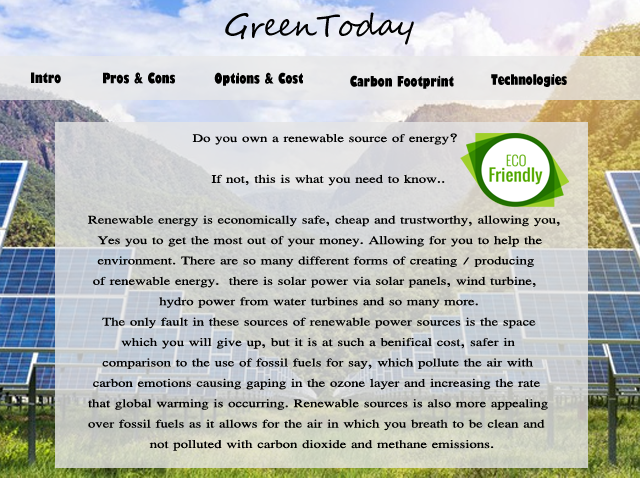
<style>
.page{position:relative;width:640px;height:480px}
.page>*{position:absolute;margin:0}
.t1{font:14px "GillSans-UltraBoldCondensed";color:#000000}
.t2{font:17px "EucrosiaUPC";color:#000000;scale:1.27 1}
</style>
<div class="page">
<p class="t1" style="left:31px;top:72px;width:30px;height:12px">Intro</p>
<p class="t1" style="left:103px;top:72px;width:72px;height:12px">Pros &amp; Cons</p>
<p class="t1" style="left:214px;top:72px;width:89px;height:14px">Options &amp; Cost</p>
<p class="t1" style="left:350px;top:75px;width:104px;height:14px">Carbon Footprint</p>
<p class="t1" style="left:491px;top:74px;width:76px;height:13px">Technologies</p>
<p class="t2" style="left:88px;top:133px;width:472px;height:318px">Do you own a renewable source of energy? <br><br>                              If not, this is what you need to know.. <br><br>    Renewable energy is economically safe, cheap and trustworthy, allowing you,<br>      Yes you to get the most out of your money. Allowing for you to help the <br>      environment. There are so many different forms of creating / producing<br>     of renewable energy.  there is solar power via solar panels, wind turbine,<br>                   hydro power from water turbines and so many more.<br>       The only fault in these sources of renewable power sources is the space <br>           which you will give up, but it is at such a benifical cost, safer in <br>       comparison to the use of fossil fuels for say, which pollute the air with<br>     carbon emotions causing gaping in the ozone layer and increasing the rate <br>    that global warming is occurring. Renewable sources is also more appealing<br>    over fossil fuels as it allows for the air in which you breath to be clean and<br>                 not polluted with carbon dioxide and methane emissions.</p>
</div>
